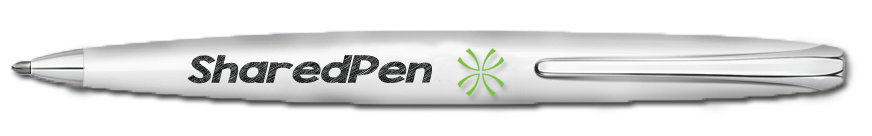
<style>
.page{position:relative;width:872px;height:136px;background:#ffffff}
.page>*{position:absolute;margin:0}
.t1{font:30px "KGBlankSpaceSketch";color:#070808;font-style:italic;scale:1.39 1}
</style>
<div class="page">
<p class="t1" style="left:187px;top:55px;width:245px;height:29px">SharedPen</p>
</div>
